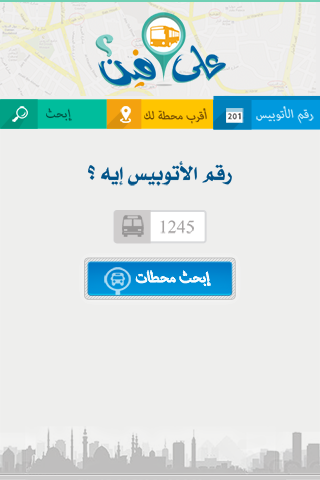
<style>
.page{position:relative;width:320px;height:480px;background:#eeeeed}
.page>*{position:absolute;margin:0}
.t1{font:16px "Arial-BlackItalic";letter-spacing:0.025em;color:#014f41}
.t2{font:16px "Arial-BlackItalic";color:#714a03}
.t3{font:17.2px "Arial-BlackItalic";color:#caecfb}
.t4{font:23px "Khalid-Art-bold";color:#015388;scale:0.88 1}
.t5{font:20px "OldAnticDecorative";color:#a6a3a3}
.t6{font:21.6px "Arial-BlackItalic";color:#f2f9fd}
.t7{font:20px "Arial-BlackItalic";color:#ffffff}
</style>
<div class="page">
<p class="t1" style="left:46px;top:108px;width:26px;height:13px">إبحث</p>
<p class="t2" style="left:144px;top:108px;width:63px;height:16px">أقرب محطة لك</p>
<p class="t3" style="left:256px;top:106px;width:58px;height:18px">رقم الأتوبيس</p>
<p class="t3" style="left:256px;top:106px;width:58px;height:18px">رقم الأتوبيس</p>
<p class="t4" style="left:88px;top:161px;width:144px;height:25px">رقم الأتوبيس إيه ؟</p>
<p class="t5" style="left:160px;top:220px;width:34px;height:14px">1245</p>
<p class="t6" style="left:133px;top:270px;width:81px;height:17px">إبحث محطات</p>
<p class="t7" style="left:136px;top:270px;width:75px;height:16px">إبحث محطات</p>
</div>
